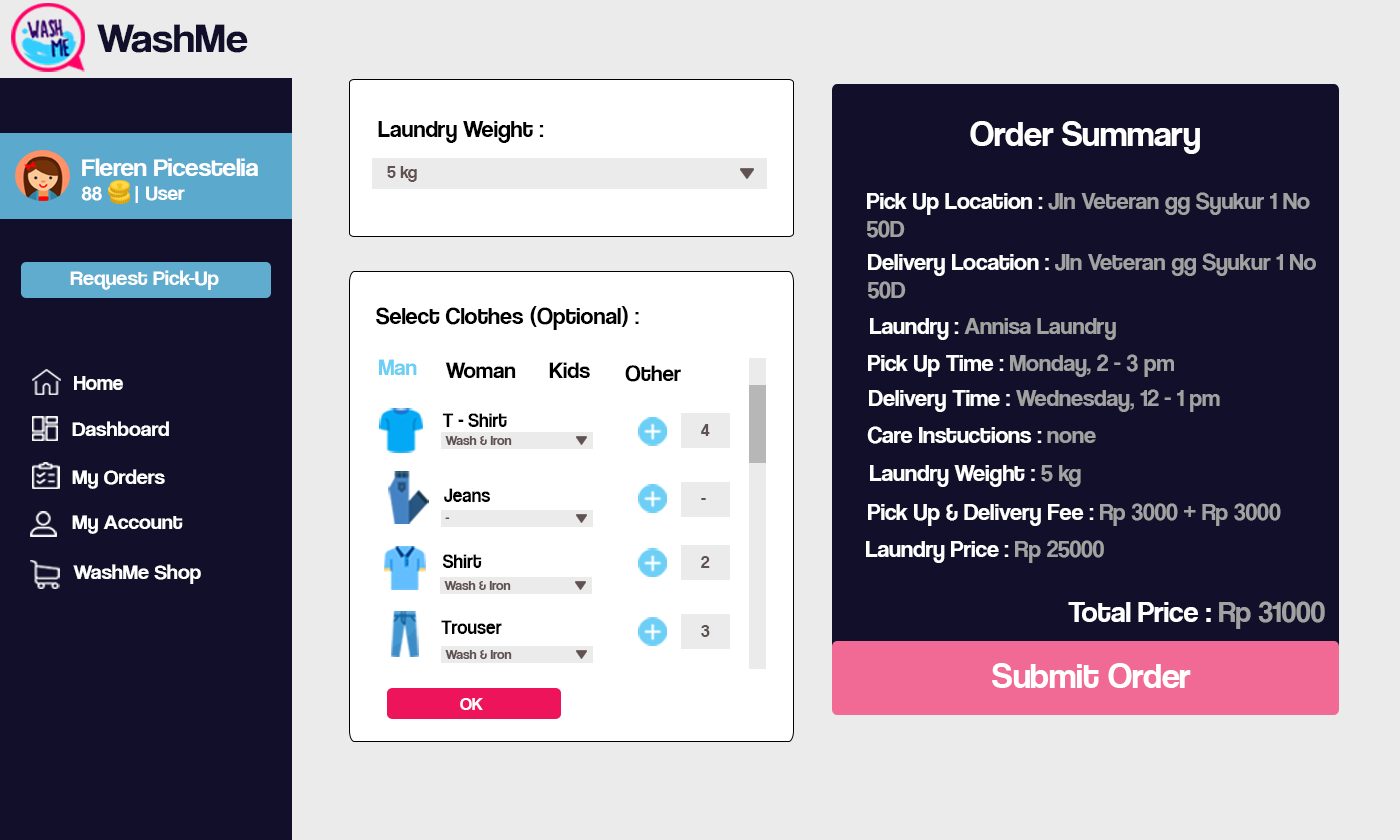
<style>
.page{position:relative;width:1400px;height:840px;background:#120f2b}
.page>*{position:absolute;margin:0}
.t1{font:42.1px "CoolveticaRg-Regular";color:#120f2b;scale:1.05 1}
.t2{font:24px "CoolveticaRg-Regular";color:#000000}
.t3{font:36px "CoolveticaRg-Regular";color:#ffffff}
.t4{font:25.2px "CoolveticaRg-Regular";color:#ffffff;scale:1.05 1}
.t5{font:20px "CoolveticaRg-Regular";color:#ffffff;scale:1.05 1}
.t6{font:18px "CoolveticaRg-Regular";color:#605252}
.t7{font:24px "CoolveticaRg-Regular";color:#a1a1a1}
.t8{font:24px "CoolveticaRg-Regular";color:#ffffff}
.t9{font:21px "CoolveticaRg-Regular";color:#ffffff;scale:1.05 1}
.t10{font:22.4px "CoolveticaRg-Regular";color:#6dcff6}
.t11{font:22.4px "CoolveticaRg-Regular";color:#000000}
.t12{font:21px "CoolveticaRg-Regular";color:#ffffff}
.t13{font:20.2px "CoolveticaRg-Regular";color:#000000;scale:0.96 1}
.t14{font:14px "CoolveticaRg-Regular";color:#605252}
.t15{font:30px "CoolveticaRg-Regular";color:#ffffff}
.t16{font:30px "CoolveticaRg-Regular";color:#a1a1a1}
.t17{font:18px "CoolveticaRg-Regular";color:#ffffff}
</style>
<div class="page">
<p class="t1" style="left:97px;top:24px;width:151px;height:29px">WashMe</p>
<p class="t2" style="left:378px;top:121px;width:166px;height:22px">Laundry Weight :</p>
<p class="t3" style="left:970px;top:121px;width:230px;height:33px">Order Summary</p>
<p class="t4" style="left:81px;top:158px;width:177px;height:45px">Fleren Picestelia<br><span class="t5">88      | User</span></p>
<p class="t6" style="left:387px;top:166px;width:30px;height:16px">5 kg</p>
<p class="t7" style="left:867px;top:192px;width:443px;height:46px"><span class="t8">Pick Up Location : </span>Jln Veteran gg Syukur 1 No<br>50D</p>
<p class="t7" style="left:868px;top:253px;width:448px;height:46px"><span class="t8">Delivery Location : </span>Jln Veteran gg Syukur 1 No<br>50D</p>
<p class="t9" style="left:70px;top:270px;width:149px;height:20px">Request Pick-Up</p>
<p class="t2" style="left:376px;top:306px;width:263px;height:24px">Select Clothes (Optional) :</p>
<p class="t7" style="left:870px;top:318px;width:246px;height:22px"><span class="t8">Laundry : </span>Annisa Laundry</p>
<p class="t10" style="left:379px;top:359px;width:38px;height:16px">Man</p>
<p class="t11" style="left:445px;top:362px;width:71px;height:16px">Woman</p>
<p class="t11" style="left:549px;top:362px;width:41px;height:16px">Kids</p>
<p class="t11" style="left:625px;top:365px;width:56px;height:17px">Other</p>
<p class="t7" style="left:868px;top:354px;width:306px;height:23px"><span class="t8">Pick Up Time : </span>Monday, 2 - 3 pm</p>
<p class="t12" style="left:74px;top:376px;width:49px;height:14px">Home</p>
<p class="t7" style="left:869px;top:389px;width:351px;height:23px"><span class="t8">Delivery Time : </span>Wednesday, 12 - 1 pm</p>
<p class="t13" style="left:442px;top:413px;width:65px;height:14px">T - Shirt</p>
<p class="t9" style="left:72px;top:421px;width:97px;height:15px">Dashboard</p>
<p class="t6" style="left:701px;top:424px;width:9px;height:12px">4</p>
<p class="t14" style="left:445px;top:436px;width:67px;height:9px">Wash &amp; Iron</p>
<p class="t8" style="left:867px;top:426px;width:229px;height:18px">Care Instuctions : <span class="t7">none</span></p>
<p class="t9" style="left:72px;top:469px;width:93px;height:20px">My Orders</p>
<p class="t8" style="left:870px;top:465px;width:211px;height:22px">Laundry Weight : <span class="t7">5 kg</span></p>
<p class="t13" style="left:444px;top:488px;width:46px;height:14px">Jeans</p>
<p class="t6" style="left:701px;top:498px;width:5px;height:2px">-</p>
<p class="t8" style="left:868px;top:503px;width:413px;height:23px">Pick Up &amp; Delivery Fee : <span class="t7">Rp 3000 + Rp 3000</span></p>
<p class="t9" style="left:72px;top:515px;width:111px;height:19px">My Account</p>
<p class="t14" style="left:445px;top:517px;width:5px;height:2px">-</p>
<p class="t8" style="left:866px;top:540px;width:238px;height:23px">Laundry Price : <span class="t7">Rp 25000</span></p>
<p class="t13" style="left:442px;top:554px;width:40px;height:14px">Shirt</p>
<p class="t6" style="left:701px;top:556px;width:9px;height:12px">2</p>
<p class="t9" style="left:73px;top:564px;width:128px;height:20px">WashMe Shop</p>
<p class="t14" style="left:444px;top:581px;width:67px;height:9px">Wash &amp; Iron</p>
<p class="t15" style="left:1068px;top:601px;width:257px;height:28px">Total Price : <span class="t16">Rp 31000</span></p>
<p class="t13" style="left:441px;top:620px;width:61px;height:14px">Trouser</p>
<p class="t6" style="left:701px;top:625px;width:9px;height:12px">3</p>
<p class="t14" style="left:445px;top:650px;width:67px;height:9px">Wash &amp; Iron</p>
<p class="t3" style="left:992px;top:663px;width:199px;height:25px">Submit Order</p>
<p class="t17" style="left:460px;top:698px;width:23px;height:12px">OK</p>
</div>
